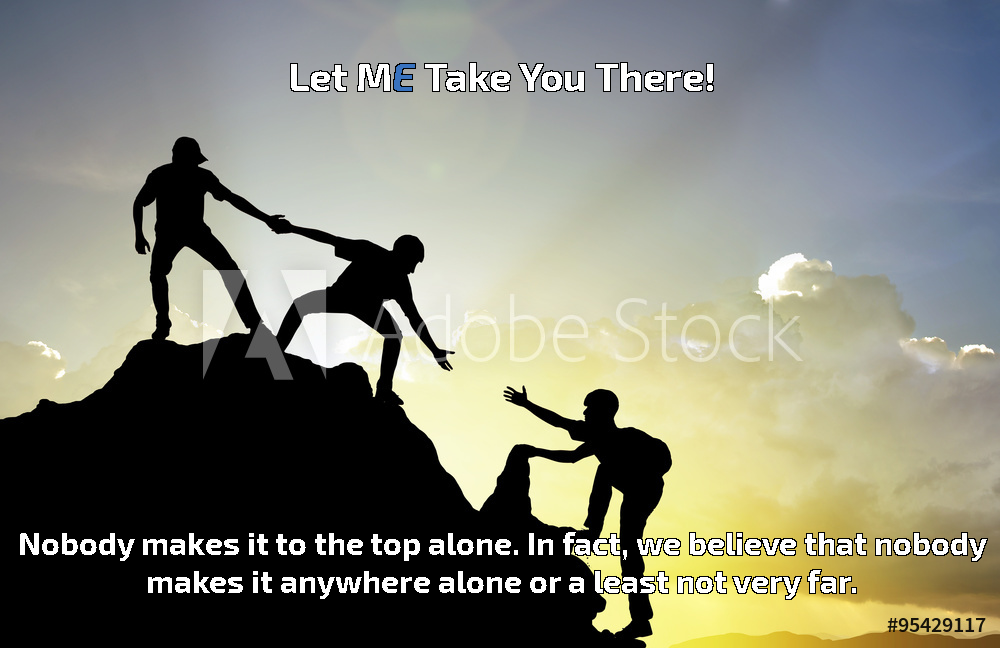
<style>
.page{position:relative;width:1000px;height:648px;background:#000000}
.page>*{position:absolute;margin:0}
.t1{font:39.7px "Exo2-Bold";color:#ffffff}
.t2{font:39.7px "Exo2-BoldItalic";color:#3872bf}
.t3{font:31.7px "Exo2-Bold";color:#ffffff}
</style>
<div class="page">
<p class="t1" style="left:291px;top:63px;width:422px;height:28px">Let M<span class="t2">E </span>Take You There!</p>
<p class="t3" style="left:20px;top:532px;width:967px;height:67px;text-align:center">Nobody makes it to the top alone. In fact, we believe that nobody makes it anywhere alone or a least not very far.</p>
</div>
